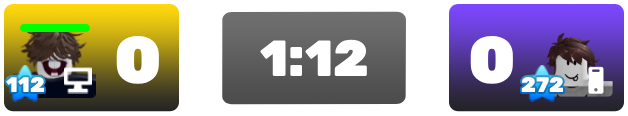
<style>
.page{position:relative;width:628px;height:116px;background:#ffffff}
.page>*{position:absolute;margin:0}
.t1{font:66.4px "Rubik-Black";color:#ffffff}
.t2{font:50.9px "Rubik-Black";color:#ffffff}
.t3{font:21.1px "Rubik-Black";color:#ffffff}
</style>
<div class="page">
<p class="t1" style="left:116px;top:35px;width:43px;height:49px">0</p>
<p class="t2" style="left:260px;top:39px;width:107px;height:37px">1:12</p>
<p class="t1" style="left:470px;top:35px;width:43px;height:49px">0</p>
<p class="t3" style="left:6px;top:76px;width:39px;height:17px">112</p>
<p class="t3" style="left:521px;top:76px;width:43px;height:17px">272</p>
</div>
